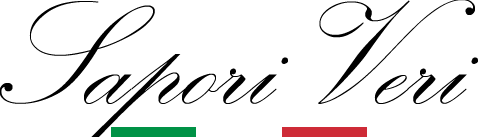
<style>
.page{position:relative;width:478px;height:137px;background:#ffffff}
.page>*{position:absolute;margin:0}
.t1{font:150px "KunstlerScript";color:#000000}
</style>
<div class="page">
<p class="t1" style="left:0px;top:0px;width:478px;height:138px">SaporiVeri</p>
</div>
